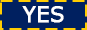
<style>
.page{position:relative;width:87px;height:30px;background:#002060}
.page>*{position:absolute;margin:0}
.t1{font:21px "Verdana";color:#ffffff;font-weight:bold}
</style>
<div class="page">
<p class="t1" style="left:22px;top:6px;width:42px;height:17px">YES</p>
</div>
